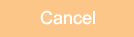
<style>
.page{position:relative;width:134px;height:37px;background:#fdc689}
.page>*{position:absolute;margin:0}
.t1{font:18px "ArialMT";color:#ffffff}
</style>
<div class="page">
<p class="t1" style="left:40px;top:10px;width:55px;height:15px">Cancel</p>
</div>
